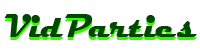
<style>
.page{position:relative;width:200px;height:50px;background:#ffffff}
.page>*{position:absolute;margin:0}
.t1{font:33.3px "Magneto-Bold";color:#004800}
</style>
<div class="page">
<p class="t1" style="left:4px;top:14px;width:193px;height:23px">VidParties</p>
</div>
